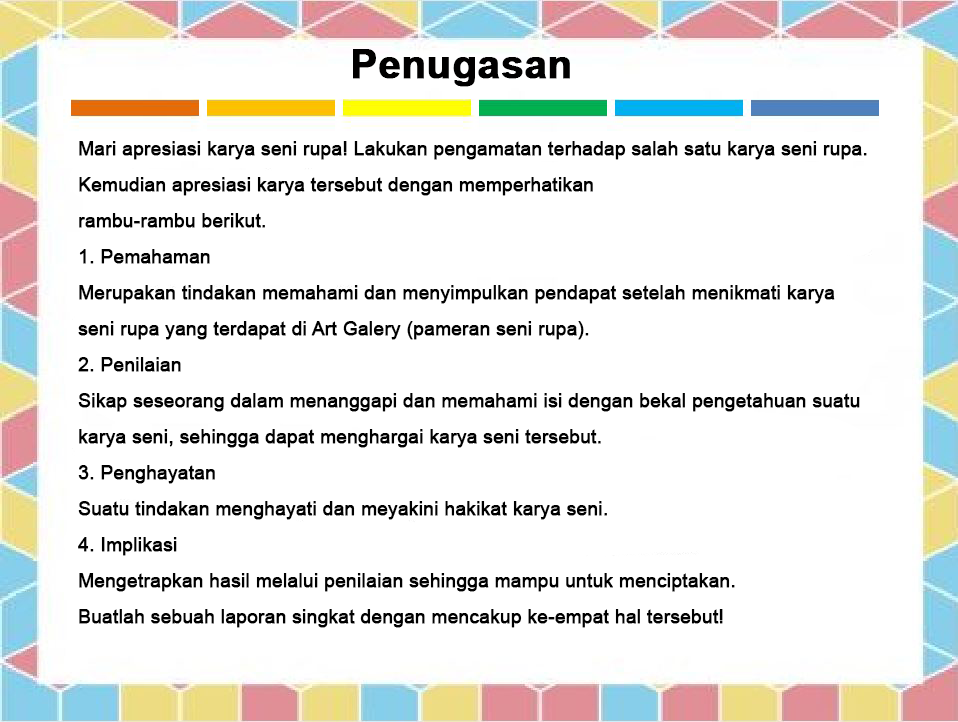
<style>
.page{position:relative;width:958px;height:722px;background:#ffffff}
.page>*{position:absolute;margin:0}
.t1{font:40px "Arial-BoldMT";color:#010000;font-weight:bold}
.t2{font:18.7px/36px "ArialMT";color:#000000;font-weight:bold}
</style>
<div class="page">
<p class="t1" style="left:353px;top:49px;width:217px;height:38px">Penugasan</p>
<p class="t2" style="left:78px;top:141px;width:789px;height:487px">Mari apresiasi karya seni rupa! Lakukan pengamatan terhadap salah satu karya seni rupa. <br>Kemudian apresiasi karya tersebut dengan memperhatikan <br>rambu-rambu berikut.<br>1. Pemahaman<br>Merupakan tindakan memahami dan menyimpulkan pendapat setelah menikmati karya <br>seni rupa yang terdapat di Art Galery (pameran seni rupa).<br>2. Penilaian<br>Sikap seseorang dalam menanggapi dan memahami isi dengan bekal pengetahuan suatu <br>karya seni, sehingga dapat menghargai karya seni tersebut.<br>3. Penghayatan <br>Suatu tindakan menghayati dan meyakini hakikat karya seni.<br>4. Implikasi<br>Mengetrapkan hasil melalui penilaian sehingga mampu untuk menciptakan.<br>Buatlah sebuah laporan singkat dengan mencakup ke-empat hal tersebut!</p>
</div>
